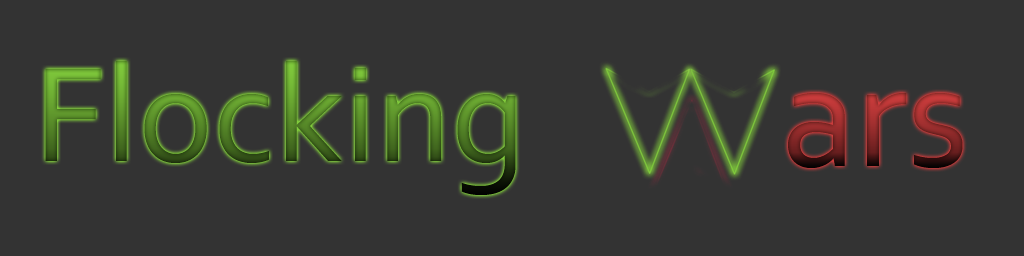
<style>
.page{position:relative;width:1024px;height:256px;background:#333333}
.page>*{position:absolute;margin:0}
.t1{font:141.3px "Corbel"}
.t2{font:153.2px "Corbel"}
</style>
<div class="page">
<p class="t1" style="left:45px;top:61px;width:471px;height:134px">Flocking</p>
<p class="t2" style="left:788px;top:93px;width:175px;height:75px">ars</p>
</div>
